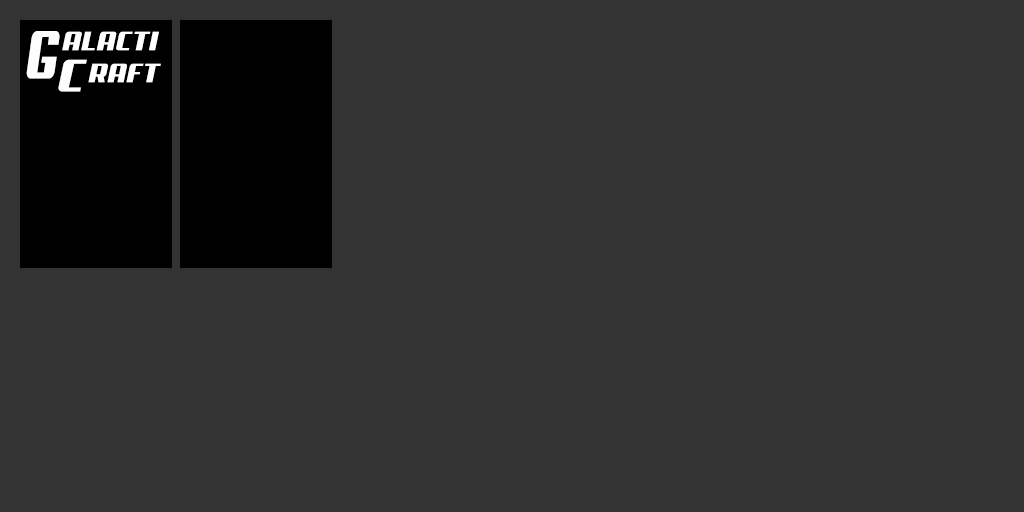
<style>
.page{position:relative;width:1024px;height:512px;background:#333333}
.page>*{position:absolute;margin:0}
.t1{font:69px "Aero";letter-spacing:0.02em;color:#fefefe;scale:0.67 1}
.t2{font:46px "Aero";letter-spacing:0.02em;color:#fefefe}
</style>
<div class="page">
<p class="t1" style="left:26px;top:31px;width:34px;height:48px">G</p>
<p class="t2" style="left:62px;top:31px;width:97px;height:20px">ALACTI</p>
<p class="t2" style="left:58px;top:59px;width:29px;height:33px">C</p>
<p class="t2" style="left:88px;top:63px;width:73px;height:20px">RAFT</p>
</div>
